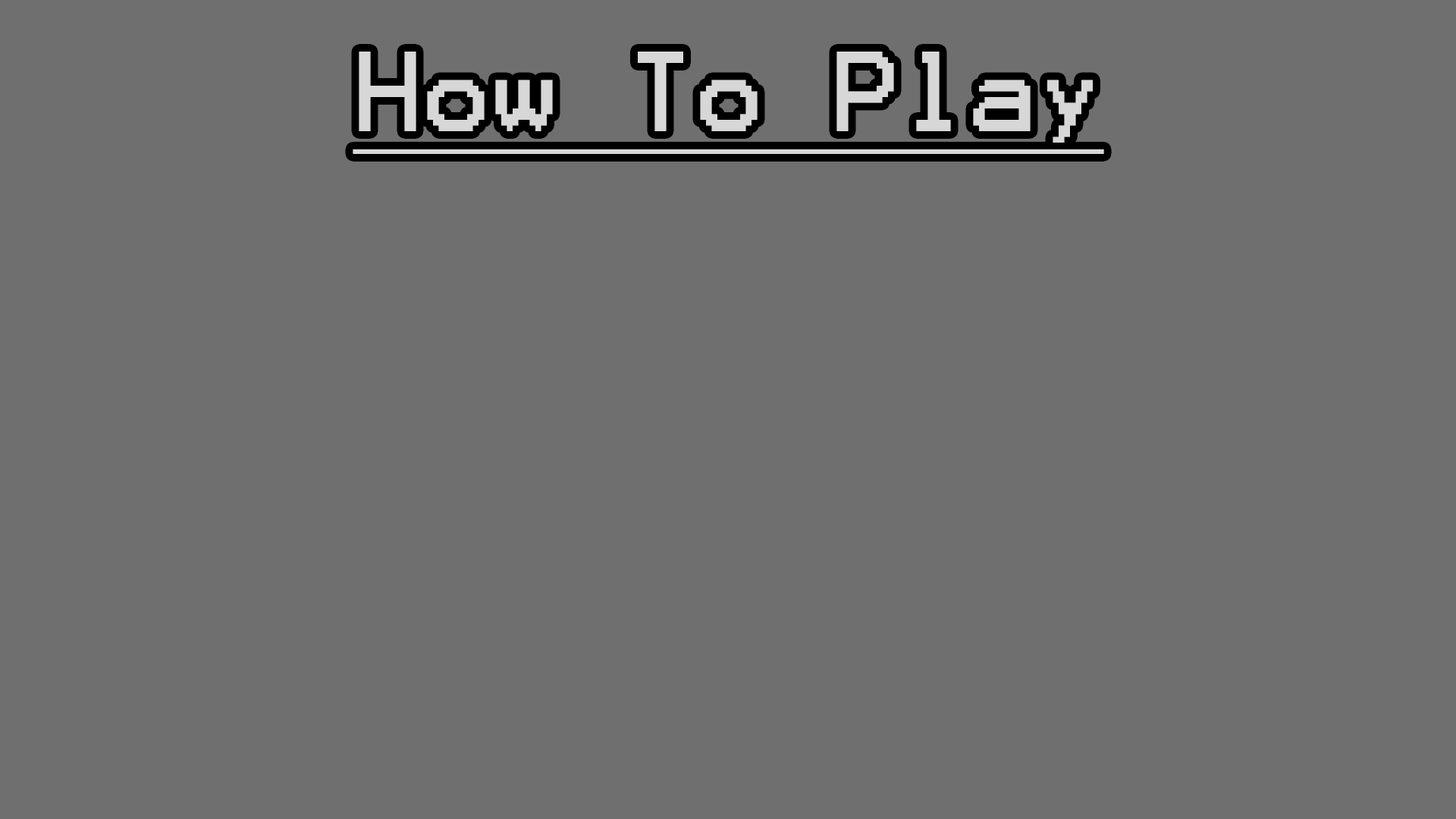
<style>
.page{position:relative;width:1456px;height:819px;background:#6f6f6f}
.page>*{position:absolute;margin:0}
.t1{font:91px "Terminal";color:#d7d7d7;text-decoration:underline}
</style>
<div class="page">
<p class="t1" style="left:353px;top:52px;width:751px;height:102px">How To Play</p>
</div>
